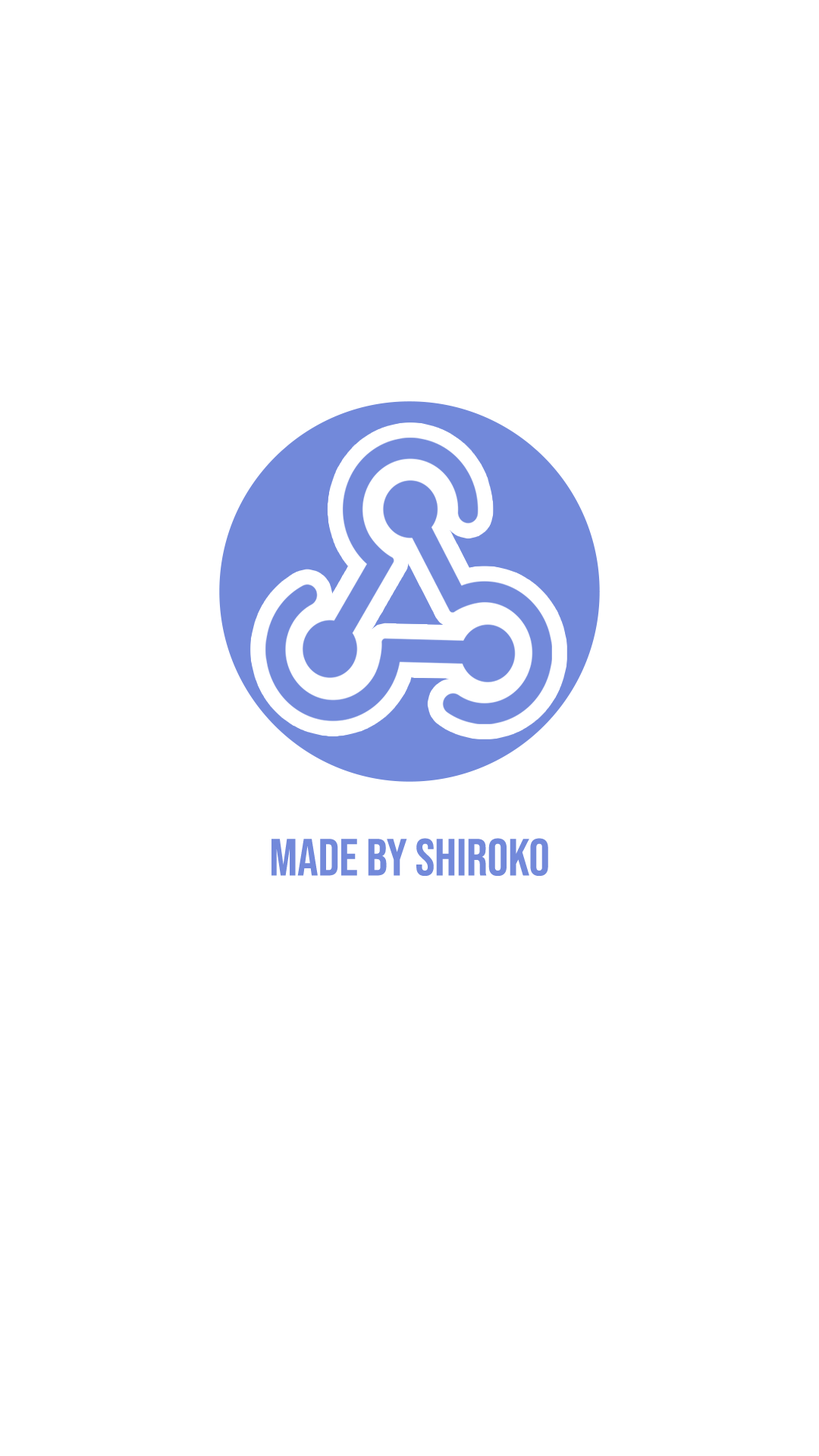
<style>
.page{position:relative;width:819px;height:1456px;background:#ffffff}
.page>*{position:absolute;margin:0}
.t1{font:51.9px "BebasNeue-Regular";color:#7289da}
</style>
<div class="page">
<p class="t1" style="left:271px;top:838px;width:277px;height:38px">Made By ShIroko</p>
</div>
